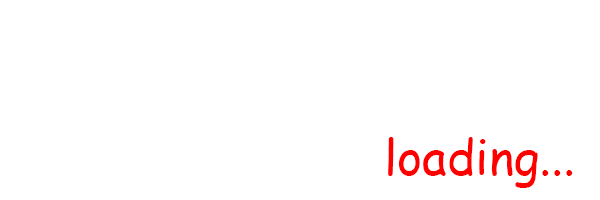
<style>
.page{position:relative;width:600px;height:200px;background:#ffffff}
.page>*{position:absolute;margin:0}
.t1{font:48px "ComicSansMS";color:#ff0000}
</style>
<div class="page">
<p class="t1" style="left:388px;top:137px;width:185px;height:51px">loading...</p>
</div>
